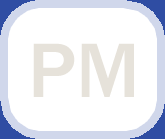
<style>
.page{position:relative;width:165px;height:139px;background:#ffffff}
.page>*{position:absolute;margin:0}
.t1{font:80px "FranklinGothic-Medium";color:#e6e2da}
</style>
<div class="page">
<p class="t1" style="left:33px;top:43px;width:101px;height:54px">PM</p>
</div>
